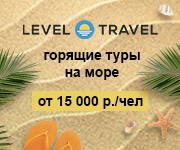
<style>
.page{position:relative;width:180px;height:150px}
.page>*{position:absolute;margin:0}
.t1{font:13.9px "Arial-BoldMT";color:#000000}
.t2{font:13.8px "Arial-BoldMT";color:#000000}
</style>
<div class="page">
<p class="t1" style="left:44px;top:52px;width:96px;height:28px;text-align:center">горящие туры<br>на море</p>
<p class="t2" style="left:38px;top:96px;width:105px;height:13px">от 15 000 р./чел</p>
</div>
